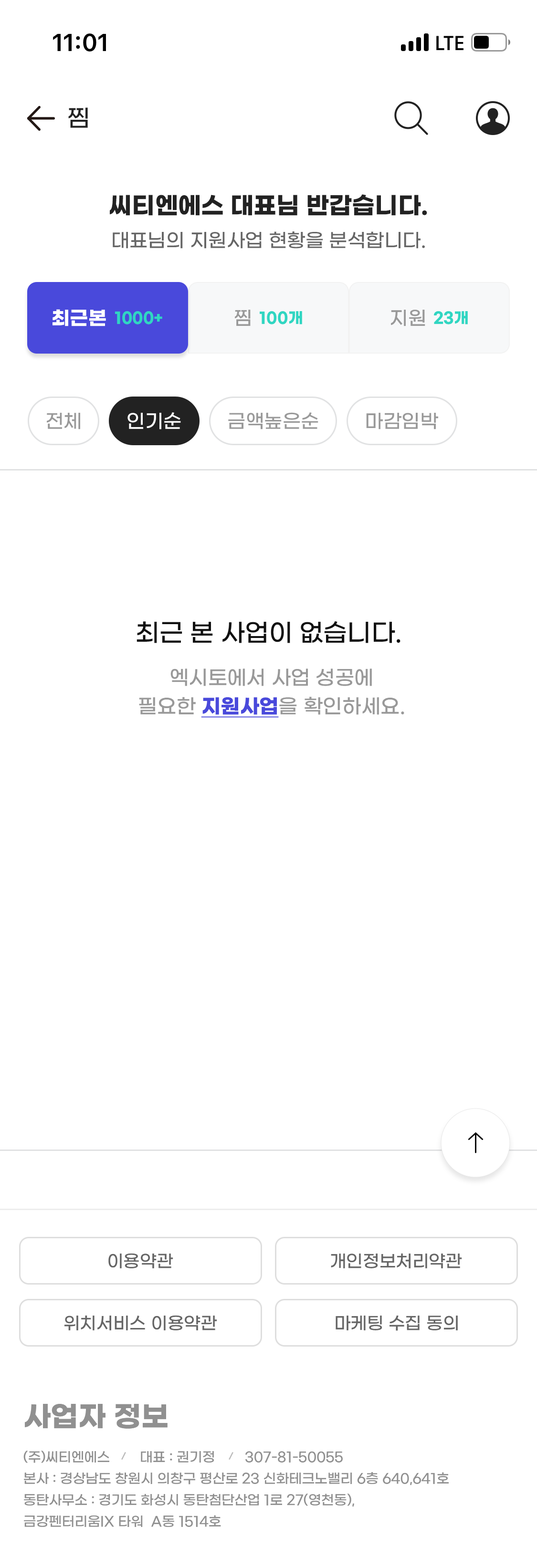
<style>
.page{position:relative;width:537px;height:1568px;background:#ffffff}
.page>*{position:absolute;margin:0}
.t1{font:23.9px "GmarketSansMedium";color:#222222}
.t2{font:23.9px "GmarketSansBold";color:#222222}
.t3{font:19.1px "GmarketSansMedium";color:#666666}
.t4{font:19.1px "GmarketSansBold";color:#ffffff}
.t5{font:15.3px "GmarketSansBold";color:#30d6c2}
.t6{font:19.1px "GmarketSansMedium";letter-spacing:0.01em;color:#999999}
.t7{font:15.3px "GmarketSansBold";letter-spacing:0.01em;color:#30d6c2}
.t8{font:19.1px "GmarketSansMedium";color:#999999}
.t9{font:19.1px "GmarketSansMedium";color:#ffffff}
.t10{font:24.8px "GmarketSansMedium";color:#101010}
.t11{font:20px/28.6px "GmarketSansMedium";color:#999999}
.t12{font:20px/28.6px "GmarketSansBold";color:#4949db;text-decoration:underline}
.t13{font:17.2px "GmarketSansMedium";color:#666666}
.t14{font:28.6px "GmarketSansBold";color:#909090}
.t15{font:13.4px/21.5px "GmarketSansMedium";color:#909090}
</style>
<div class="page">
<p class="t1" style="left:68px;top:107px;width:20px;height:21px">찜</p>
<p class="t2" style="left:110px;top:194px;width:317px;height:22px">씨티엔에스 대표님 반갑습니다.</p>
<p class="t3" style="left:113px;top:231px;width:312px;height:18px">대표님의 지원사업 현황을 분석합니다.</p>
<p class="t4" style="left:52px;top:309px;width:54px;height:17px">최근본</p>
<p class="t5" style="left:115px;top:311px;width:47px;height:13px">1000+</p>
<p class="t6" style="left:235px;top:310px;width:16px;height:16px">찜</p>
<p class="t7" style="left:260px;top:311px;width:42px;height:13px">100개</p>
<p class="t8" style="left:391px;top:310px;width:34px;height:16px">지원</p>
<p class="t5" style="left:434px;top:311px;width:34px;height:13px">23개</p>
<p class="t8" style="left:47px;top:413px;width:33px;height:16px">전체</p>
<p class="t9" style="left:127px;top:412px;width:54px;height:17px">인기순</p>
<p class="t8" style="left:228px;top:412px;width:90px;height:17px">금액높은순</p>
<p class="t8" style="left:366px;top:413px;width:72px;height:16px">마감임박</p>
<p class="t10" style="left:136px;top:621px;width:264px;height:22px">최근 본 사업이 없습니다.</p>
<p class="t11" style="left:139px;top:669px;width:265px;height:49px;text-align:center">엑시토에서 사업 성공에<br>필요한 <span class="t12">지원사업</span>을 확인하세요.</p>
<p class="t13" style="left:108px;top:1253px;width:65px;height:15px">이용약관</p>
<p class="t13" style="left:331px;top:1253px;width:131px;height:15px">개인정보처리약관</p>
<p class="t13" style="left:64px;top:1315px;width:153px;height:15px">위치서비스 이용약관</p>
<p class="t13" style="left:335px;top:1315px;width:123px;height:16px">마케팅 수집 동의</p>
<p class="t14" style="left:25px;top:1404px;width:142px;height:25px">사업자 정보</p>
<p class="t15" style="left:23px;top:1451px;width:426px;height:76px">(주)씨티엔에스        대표 : 권기정        307-81-50055<br>본사 : 경상남도 창원시 의창구 평산로 23 신화테크노밸리 6층 640,641호<br>동탄사무소 : 경기도 화성시 동탄첨단산업 1로 27(영천동),<br>금강펜터리움IX 타워  A동 1514호</p>
</div>
